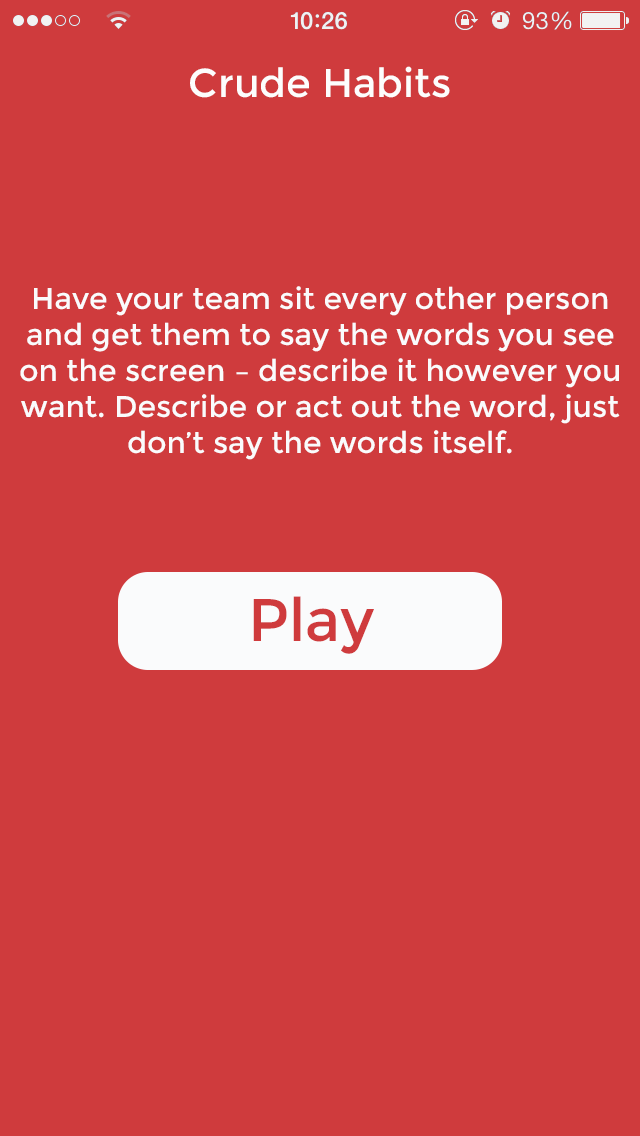
<style>
.page{position:relative;width:640px;height:1136px;background:#cf3b3d}
.page>*{position:absolute;margin:0}
.t1{font:40px "Montserrat-Regular";color:#fdfdfd}
.t2{font:30px "Montserrat-Regular";color:#fafbfc}
.t3{font:60px "Montserrat-Regular";color:#cf3b3d}
</style>
<div class="page">
<p class="t1" style="left:190px;top:66px;width:260px;height:32px">Crude Habits</p>
<p class="t2" style="left:20px;top:286px;width:600px;height:174px;text-align:center">Have your team sit every other person<br> and get them to say the words you see <br>on the screen – describe it however you<br> want. Describe or act out the word, just <br>don’t say the words itself.</p>
<p class="t3" style="left:253px;top:596px;width:121px;height:58px">Play</p>
</div>
